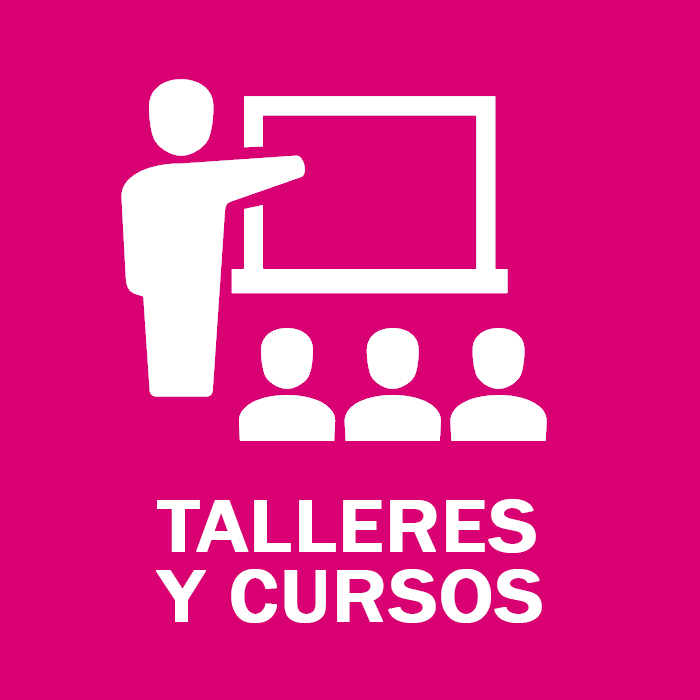
<style>
.page{position:relative;width:700px;height:700px;background:#d80073}
.page>*{position:absolute;margin:0}
.t1{font:77px/70px "FranklinGothic-Medium";color:#ffffff;font-weight:bold;scale:1.09 1}
</style>
<div class="page">
<p class="t1" style="left:156px;top:499px;width:386px;height:124px">TALLERES<br>Y CURSOS</p>
</div>
